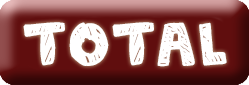
<style>
.page{position:relative;width:249px;height:85px}
.page>*{position:absolute;margin:0}
.t1{font:62.6px "DENNE|Sketchy";letter-spacing:-0.025em;color:#ffffff;scale:1.13 1}
</style>
<div class="page">
<p class="t1" style="left:23px;top:22px;width:204px;height:45px">TOTAL</p>
</div>
